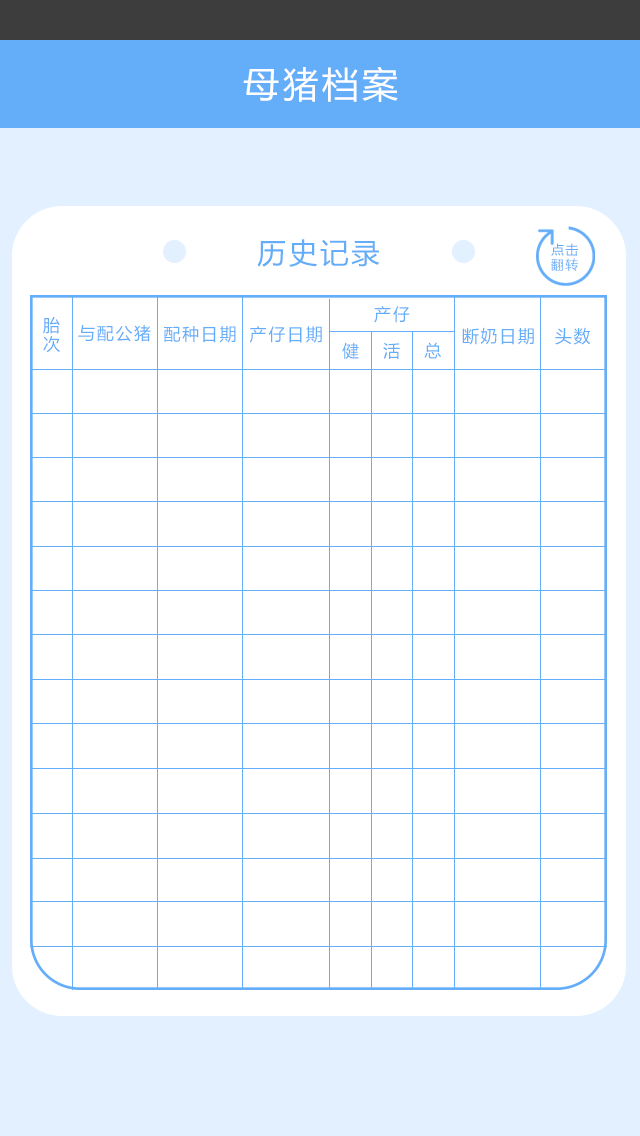
<style>
.page{position:relative;width:640px;height:1136px;background:#ffffff}
.page>*{position:absolute;margin:0}
.t1{font:36px "MicrosoftYaHei";letter-spacing:0.1em;color:#ffffff}
.t2{font:28.5px "MicrosoftYaHei";letter-spacing:0.1em;color:#64adf9}
.t3{font:13px "MicrosoftYaHei";letter-spacing:0.1em;color:#64adf9}
.t4{font:17px/11.9px "MicrosoftYaHei";letter-spacing:0.1em;color:#64adf9}
.t5{font:17px "MicrosoftYaHei";letter-spacing:0.1em;color:#64adf9}
</style>
<div class="page">
<p class="t1" style="left:243px;top:66px;width:155px;height:36px">母猪档案</p>
<p class="t2" style="left:257px;top:239px;width:123px;height:28px">历史记录</p>
<p class="t3" style="left:551px;top:243px;width:27px;height:13px">点击</p>
<p class="t3" style="left:551px;top:258px;width:27px;height:13px">翻转</p>
<p class="t4" style="left:43px;top:317px;width:17px;height:36px">胎次</p>
<p class="t5" style="left:374px;top:306px;width:36px;height:17px">产仔</p>
<p class="t5" style="left:78px;top:325px;width:73px;height:17px">与配公猪</p>
<p class="t5" style="left:164px;top:326px;width:72px;height:17px">配种日期</p>
<p class="t5" style="left:249px;top:326px;width:73px;height:17px">产仔日期</p>
<p class="t5" style="left:462px;top:327px;width:72px;height:18px">断奶日期</p>
<p class="t5" style="left:555px;top:327px;width:36px;height:18px">头数</p>
<p class="t5" style="left:342px;top:342px;width:17px;height:17px">健</p>
<p class="t5" style="left:383px;top:342px;width:17px;height:17px">活</p>
<p class="t5" style="left:424px;top:342px;width:17px;height:17px">总</p>
</div>
